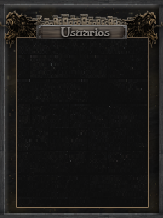
<style>
.page{position:relative;width:163px;height:218px}
.page>*{position:absolute;margin:0}
.t1{font:12.7px "Folkard";color:#88837e}
</style>
<div class="page">
<p class="t1" style="left:61px;top:27px;width:49px;height:10px">Usuarios</p>
</div>
